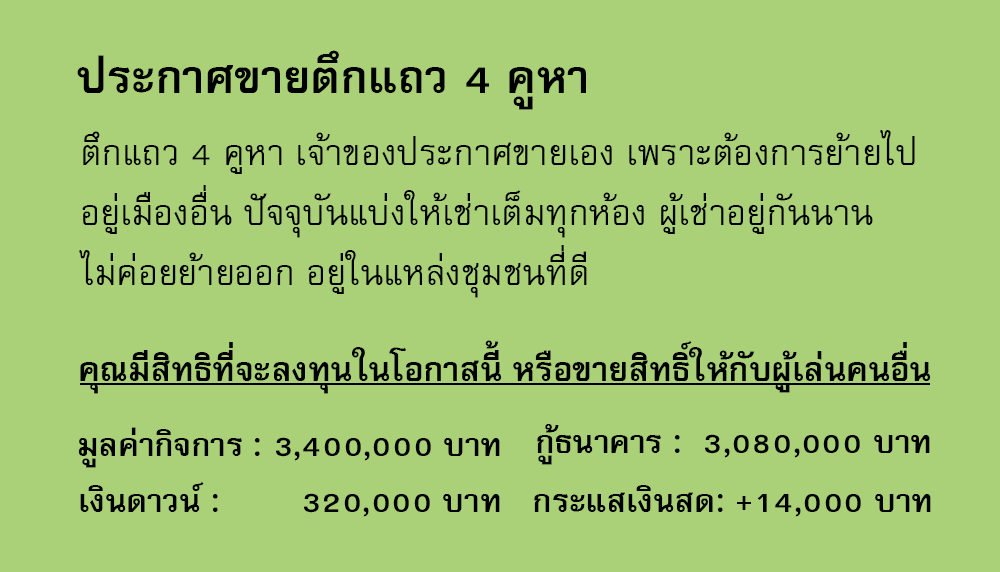
<style>
.page{position:relative;width:1000px;height:572px;background:#aad178}
.page>*{position:absolute;margin:0}
.t1{font:64px "FreesiaUPCBold";color:#000000}
.t2{font:50px/60px "FreesiaUPC";color:#000000}
.t3{font:47px "FreesiaUPCBold";color:#000000}
.t4{font:45px "FreesiaUPCBold";color:#000000}
</style>
<div class="page">
<p class="t1" style="left:77px;top:50px;width:509px;height:60px">ประกาศขายตึกแถว 4 คูหา</p>
<p class="t2" style="left:79px;top:130px;width:836px;height:168px">ตึกแถว 4 คูหา เจ้าของประกาศขายเอง เพราะต้องการย้ายไป<br>อยู่เมืองอื่น ปัจจุบันแบ่งให้เช่าเต็มทุกห้อง ผู้เช่าอยู่กันนาน<br>ไม่ค่อยย้ายออก อยู่ในแหล่งชุมชนที่ดี</p>
<p class="t3" style="left:80px;top:340px;width:851px;height:54px">คุณมีสิทธิที่จะลงทุนในโอกาสนี้ หรือขายสิทธิ์ให้กับผู้เล่นคนอื่น</p>
<p class="t4" style="left:537px;top:424px;width:393px;height:41px">กู้ธนาคาร :  3,080,000 บาท</p>
<p class="t4" style="left:78px;top:427px;width:422px;height:41px">มูลค่ากิจการ : 3,400,000 บาท</p>
<p class="t4" style="left:80px;top:481px;width:420px;height:36px">เงินดาวน์ :        320,000 บาท</p>
<p class="t4" style="left:534px;top:485px;width:397px;height:32px">กระแสเงินสด: +14,000 บาท</p>
</div>
